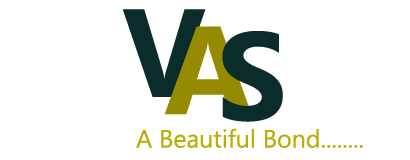
<style>
.page{position:relative;width:410px;height:160px;background:#ffffff}
.page>*{position:absolute;margin:0}
.t1{font:25px "MicrosoftTaiLe";color:#bbac07}
</style>
<div class="page">
<p class="t1" style="left:136px;top:128px;width:227px;height:20px">A Beautiful Bond........</p>
</div>
